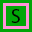
<style>
.page{position:relative;width:32px;height:32px;background:#00a608}
.page>*{position:absolute;margin:0}
.t1{font:20px "MyriadPro-Regular";color:#000000}
</style>
<div class="page">
<p class="t1" style="left:11px;top:9px;width:9px;height:14px">S</p>
</div>
